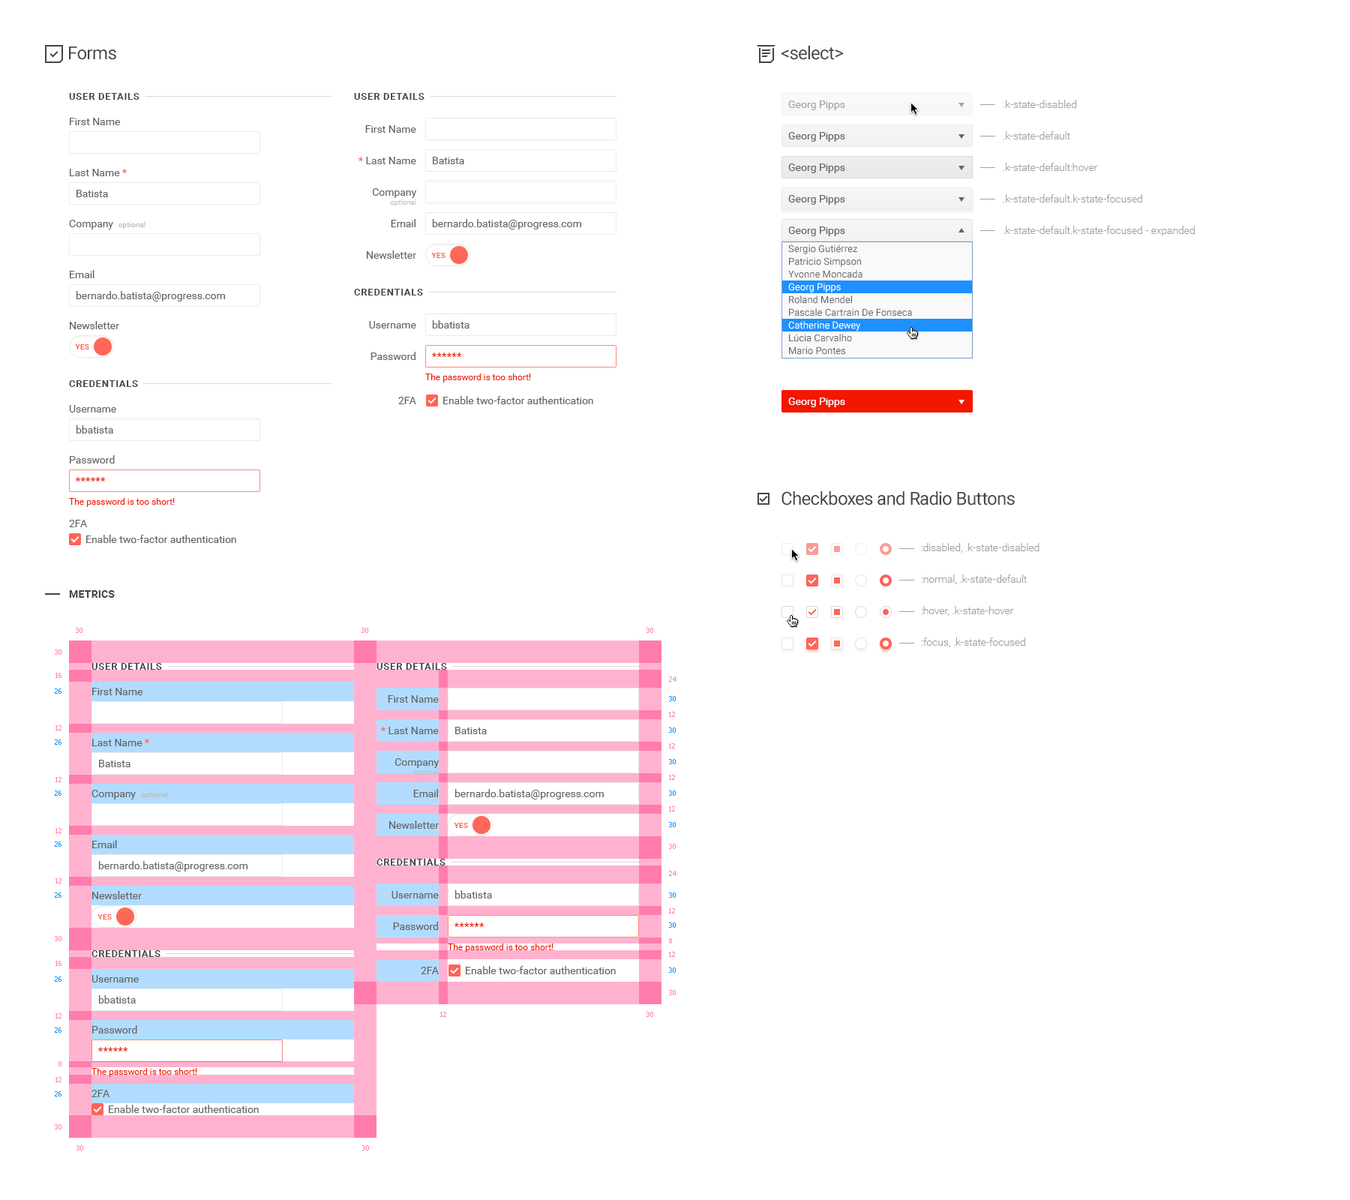
<style>
.page{position:relative;width:1350px;height:1200px;background:#ffffff}
.page>*{position:absolute;margin:0}
.t1{font:18px "Roboto-Regular";letter-spacing:-0.025em;color:#454545}
.t2{font:9.8px "Roboto-Bold";letter-spacing:0.05em;color:#454545;text-transform:uppercase}
.t3{font:10.5px "Roboto-Regular";color:#a3a3a3}
.t4{font:10.5px/31.5px "Roboto-Light";color:#a1a1a1}
.t5{font:10.5px/51px "Roboto-Regular";color:#656565}
.t6{font:10.5px/54px "Roboto-Regular";color:#656565}
.t7{font:10.5px/51px "Roboto-Regular";color:#ff6358}
.t8{font:7.5px/51px "Roboto-Regular";color:#bababa}
.t9{font:10.5px/31.5px "Roboto-Regular";color:#656565}
.t10{font:10.5px/31.5px "Roboto-Regular";color:#ff6358}
.t11{font:7.5px/9px "Roboto-LightItalic";color:#bababa}
.t12{font:10.5px/22.5px "Roboto-Regular";color:#656565}
.t13{font:10.5px "Roboto-Regular";color:#656565}
.t14{font:7.5px "Roboto-Bold";letter-spacing:0.01em;color:#ff6358;text-transform:uppercase}
.t15{font:10.5px/44.2px "Roboto-Regular";color:#656565}
.t16{font:10.5px "Roboto-Regular";color:#f31700}
.t17{font:9px "Roboto-Regular";color:#f31700}
.t18{font:10.5px "Roboto-Regular";color:#ffffff}
.t19{font:10.5px/63.8px "Roboto-Regular";color:#656565}
.t20{font:10.5px "Roboto-Bold";letter-spacing:0.01em;color:#454545;text-transform:uppercase}
.t21{font:6.8px "Tahoma";color:#ff7cae}
.t22{font:6.8px "Tahoma";color:#008aff}
</style>
<div class="page">
<p class="t1" style="left:69px;top:46px;width:47px;height:14px">Forms</p>
<p class="t1" style="left:781px;top:46px;width:62px;height:14px">&lt;select&gt;</p>
<p class="t2" style="left:69px;top:93px;width:71px;height:7px">User Details</p>
<p class="t2" style="left:354px;top:93px;width:70px;height:7px">User Details</p>
<p class="t3" style="left:788px;top:100px;width:57px;height:10px">Georg Pipps</p>
<p class="t4" style="left:1003px;top:100px;width:192px;height:136px">.k-state-disabled<br>.k-state-default<br>.k-state-default:hover<br>.k-state-default.k-state-focused<br>.k-state-default.k-state-focused - expanded</p>
<p class="t5" style="left:69px;top:118px;width:77px;height:211px"><span class="t6">First Name<br></span>Last Name <span class="t7">*<br></span>Company  <span class="t8">optional<br></span>Email<br>Newsletter</p>
<p class="t9" style="left:358px;top:125px;width:59px;height:134px;text-align:right"><span class="t6">First Name<br> </span><span class="t10">* </span>Last Name<br>Company<br><span class="t11">optional<br></span><span class="t12">Email<br></span>Newsletter</p>
<p class="t13" style="left:788px;top:132px;width:57px;height:10px">Georg Pipps</p>
<p class="t13" style="left:433px;top:157px;width:31px;height:7px">Batista</p>
<p class="t13" style="left:788px;top:164px;width:57px;height:9px">Georg Pipps</p>
<p class="t13" style="left:76px;top:190px;width:32px;height:7px">Batista</p>
<p class="t13" style="left:788px;top:195px;width:57px;height:10px">Georg Pipps</p>
<p class="t13" style="left:432px;top:219px;width:149px;height:11px">bernardo.batista@progress.com</p>
<p class="t13" style="left:788px;top:226px;width:57px;height:10px">Georg Pipps</p>
<p class="t14" style="left:431px;top:253px;width:15px;height:5px">YES</p>
<p class="t13" style="left:76px;top:291px;width:149px;height:11px">bernardo.batista@progress.com</p>
<p class="t2" style="left:354px;top:289px;width:69px;height:7px">Credentials</p>
<p class="t9" style="left:369px;top:321px;width:47px;height:83px;text-align:right">Username<br>Password<br><span class="t15">2FA</span></p>
<p class="t13" style="left:432px;top:320px;width:38px;height:8px">bbatista</p>
<p class="t14" style="left:75px;top:344px;width:14px;height:6px">YES</p>
<p class="t16" style="left:432px;top:352px;width:30px;height:5px">******</p>
<p class="t17" style="left:425px;top:374px;width:106px;height:8px">The password is too short!</p>
<p class="t2" style="left:69px;top:380px;width:69px;height:7px">Credentials</p>
<p class="t13" style="left:443px;top:396px;width:150px;height:8px">Enable two-factor authentication</p>
<p class="t18" style="left:788px;top:398px;width:57px;height:9px">Georg Pipps</p>
<p class="t6" style="left:69px;top:405px;width:47px;height:122px">Username<br><span class="t5">Password<br></span><span class="t19">2FA</span></p>
<p class="t13" style="left:76px;top:425px;width:37px;height:9px">bbatista</p>
<p class="t16" style="left:76px;top:477px;width:30px;height:5px">******</p>
<p class="t1" style="left:782px;top:491px;width:233px;height:15px">Checkboxes and Radio Buttons</p>
<p class="t17" style="left:69px;top:498px;width:106px;height:9px">The password is too short!</p>
<p class="t13" style="left:86px;top:535px;width:150px;height:8px">Enable two-factor authentication</p>
<p class="t4" style="left:921px;top:543px;width:119px;height:104px">:disabled, .k-state-disabled<br>:normal, .k-state-default<br>:hover, .k-state-hover<br>:focus, .k-state-focused</p>
<p class="t20" style="left:69px;top:590px;width:46px;height:8px">Metrics</p>
<p class="t21" style="left:76px;top:628px;width:6px;height:5px">30</p>
<p class="t21" style="left:362px;top:628px;width:6px;height:5px">30</p>
<p class="t21" style="left:646px;top:628px;width:7px;height:5px">30</p>
<p class="t21" style="left:55px;top:650px;width:7px;height:5px">30</p>
<p class="t2" style="left:92px;top:663px;width:70px;height:7px">User Details</p>
<p class="t2" style="left:376px;top:663px;width:71px;height:7px">User Details</p>
<p class="t21" style="left:56px;top:673px;width:6px;height:5px">16</p>
<p class="t21" style="left:669px;top:676px;width:7px;height:6px">24</p>
<p class="t22" style="left:55px;top:688px;width:7px;height:6px">26</p>
<p class="t5" style="left:92px;top:688px;width:76px;height:211px"><span class="t6">First Name<br></span>Last Name <span class="t7">*<br></span>Company  <span class="t8">optional<br></span>Email<br>Newsletter</p>
<p class="t9" style="left:381px;top:695px;width:59px;height:134px;text-align:right"><span class="t6">First Name<br> </span><span class="t10">* </span>Last Name<br>Company<br><span class="t11">optional<br></span><span class="t12">Email<br></span>Newsletter</p>
<p class="t22" style="left:669px;top:696px;width:7px;height:5px">30</p>
<p class="t21" style="left:669px;top:712px;width:6px;height:5px">12</p>
<p class="t21" style="left:56px;top:725px;width:6px;height:5px">12</p>
<p class="t13" style="left:455px;top:727px;width:32px;height:7px">Batista</p>
<p class="t22" style="left:669px;top:728px;width:7px;height:5px">30</p>
<p class="t22" style="left:55px;top:740px;width:7px;height:5px">26</p>
<p class="t21" style="left:669px;top:743px;width:6px;height:5px">12</p>
<p class="t13" style="left:99px;top:760px;width:31px;height:7px">Batista</p>
<p class="t22" style="left:669px;top:759px;width:7px;height:5px">30</p>
<p class="t21" style="left:56px;top:777px;width:6px;height:5px">12</p>
<p class="t21" style="left:669px;top:775px;width:6px;height:5px">12</p>
<p class="t22" style="left:55px;top:790px;width:7px;height:6px">26</p>
<p class="t13" style="left:454px;top:789px;width:150px;height:11px">bernardo.batista@progress.com</p>
<p class="t22" style="left:669px;top:790px;width:7px;height:6px">30</p>
<p class="t21" style="left:669px;top:806px;width:6px;height:6px">12</p>
<p class="t22" style="left:669px;top:822px;width:7px;height:5px">30</p>
<p class="t21" style="left:56px;top:828px;width:6px;height:5px">12</p>
<p class="t14" style="left:454px;top:823px;width:14px;height:5px">YES</p>
<p class="t22" style="left:55px;top:842px;width:7px;height:5px">26</p>
<p class="t21" style="left:669px;top:844px;width:7px;height:5px">30</p>
<p class="t13" style="left:98px;top:861px;width:150px;height:11px">bernardo.batista@progress.com</p>
<p class="t2" style="left:376px;top:859px;width:70px;height:7px">Credentials</p>
<p class="t21" style="left:56px;top:878px;width:6px;height:6px">12</p>
<p class="t21" style="left:669px;top:871px;width:7px;height:5px">24</p>
<p class="t22" style="left:55px;top:892px;width:7px;height:6px">26</p>
<p class="t9" style="left:392px;top:891px;width:47px;height:83px;text-align:right">Username<br>Password<br><span class="t15">2FA</span></p>
<p class="t13" style="left:454px;top:890px;width:38px;height:8px">bbatista</p>
<p class="t22" style="left:669px;top:892px;width:7px;height:6px">30</p>
<p class="t14" style="left:98px;top:914px;width:14px;height:6px">YES</p>
<p class="t21" style="left:669px;top:908px;width:6px;height:6px">12</p>
<p class="t16" style="left:454px;top:922px;width:30px;height:5px">******</p>
<p class="t22" style="left:669px;top:922px;width:7px;height:6px">30</p>
<p class="t21" style="left:55px;top:936px;width:7px;height:5px">30</p>
<p class="t21" style="left:669px;top:938px;width:3px;height:6px">8</p>
<p class="t2" style="left:92px;top:950px;width:68px;height:7px">Credentials</p>
<p class="t17" style="left:448px;top:944px;width:106px;height:8px">The password is too short!</p>
<p class="t21" style="left:669px;top:952px;width:6px;height:5px">12</p>
<p class="t21" style="left:56px;top:961px;width:6px;height:5px">16</p>
<p class="t13" style="left:466px;top:966px;width:150px;height:8px">Enable two-factor authentication</p>
<p class="t22" style="left:55px;top:976px;width:7px;height:6px">26</p>
<p class="t6" style="left:92px;top:975px;width:47px;height:122px">Username<br><span class="t5">Password<br></span><span class="t19">2FA</span></p>
<p class="t22" style="left:669px;top:968px;width:7px;height:5px">30</p>
<p class="t21" style="left:669px;top:990px;width:7px;height:5px">30</p>
<p class="t13" style="left:98px;top:995px;width:38px;height:9px">bbatista</p>
<p class="t21" style="left:56px;top:1013px;width:6px;height:5px">12</p>
<p class="t21" style="left:440px;top:1012px;width:6px;height:5px">12</p>
<p class="t21" style="left:646px;top:1012px;width:7px;height:5px">30</p>
<p class="t22" style="left:55px;top:1028px;width:7px;height:5px">26</p>
<p class="t16" style="left:98px;top:1047px;width:30px;height:5px">******</p>
<p class="t21" style="left:58px;top:1061px;width:4px;height:5px">8</p>
<p class="t17" style="left:92px;top:1068px;width:105px;height:9px">The password is too short!</p>
<p class="t21" style="left:56px;top:1077px;width:6px;height:5px">12</p>
<p class="t22" style="left:55px;top:1091px;width:7px;height:5px">26</p>
<p class="t13" style="left:109px;top:1105px;width:150px;height:8px">Enable two-factor authentication</p>
<p class="t21" style="left:55px;top:1124px;width:7px;height:6px">30</p>
<p class="t21" style="left:76px;top:1145px;width:7px;height:5px">30</p>
<p class="t21" style="left:362px;top:1145px;width:7px;height:5px">30</p>
</div>
